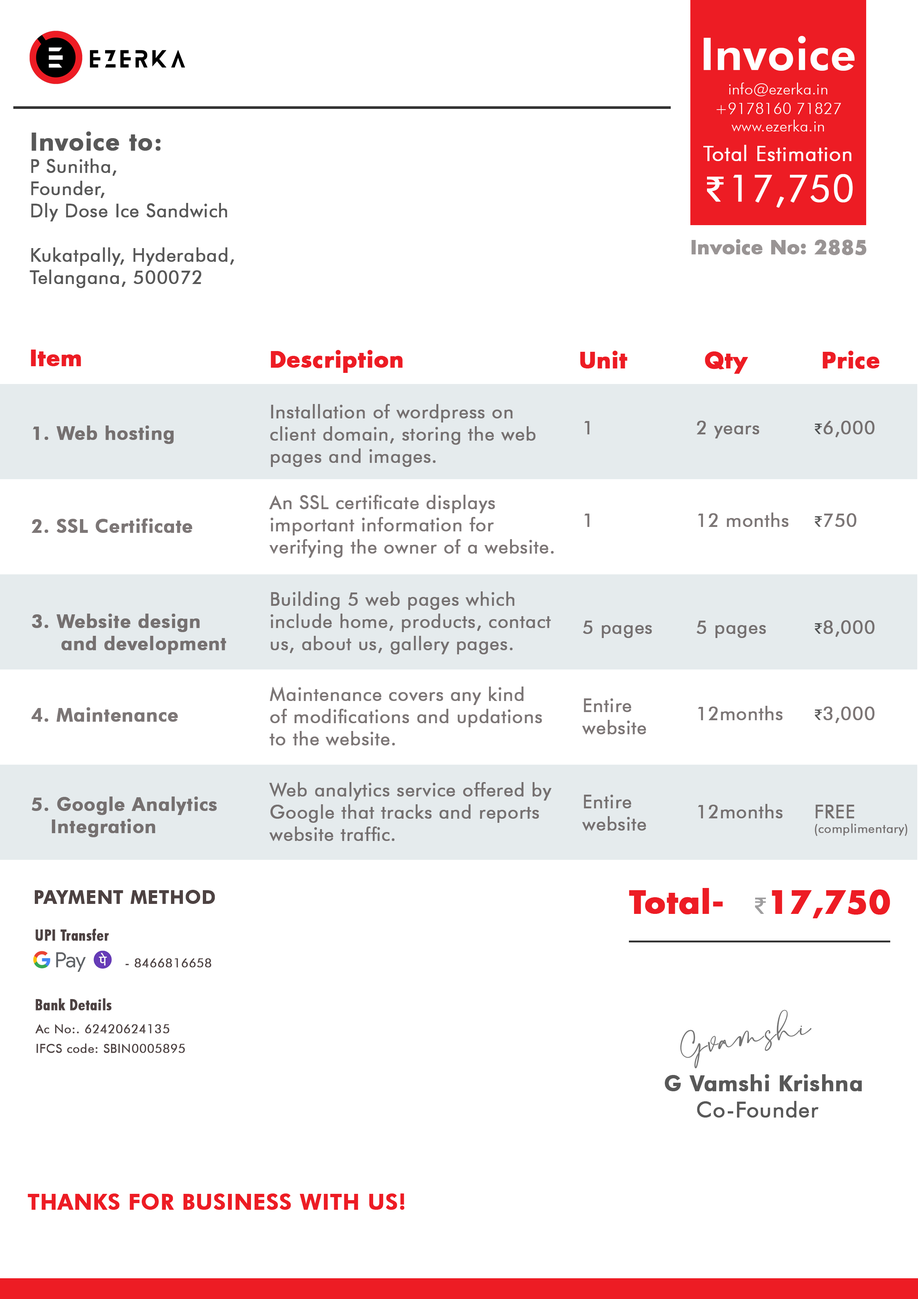
<style>
.page{position:relative;width:918px;height:1299px;background:#ffffff}
.page>*{position:absolute;margin:0}
.t1{font:45.1px "FuturaBT-Heavy";letter-spacing:0.015em;color:#fefefe}
.t2{font:15.4px "FuturaBT-Light";letter-spacing:0.015em;color:#fefefe}
.t3{font:18.5px "FuturaBT-Book";letter-spacing:0.015em;color:#585858;font-weight:bold}
.t4{font:24.7px "FuturaBT-Heavy";letter-spacing:0.015em;color:#585858;font-weight:bold}
.t5{font:20.9px "FuturaBT-Light";letter-spacing:0.015em;color:#fefefe;font-weight:bold}
.t6{font:36.9px "MyriadPro-Regular";letter-spacing:0.015em;color:#fefefe;font-weight:bold}
.t7{font:36.9px "FuturaBT-Light";letter-spacing:0.015em;color:#fefefe;font-weight:bold}
.t8{font:18.4px "Futura-Bold";letter-spacing:0.015em;color:#999494;font-weight:bold}
.t9{font:21.6px "Futura-Bold";letter-spacing:0.015em;color:#ed1c24;font-weight:bold}
.t10{font:18.5px "FuturaBT-Book";letter-spacing:0.015em;color:#757070;font-weight:bold}
.t11{font:18.5px "FuturaBT-Heavy";letter-spacing:0.015em;color:#757070;font-weight:bold}
.t12{font:15.4px "MyriadPro-Regular";letter-spacing:0.015em;color:#757070;font-weight:bold}
.t13{font:18.5px "FuturaBT-Book";letter-spacing:0.015em;color:#7c7676;font-weight:bold}
.t14{font:18.5px "FuturaBT-Heavy";letter-spacing:0.015em;color:#7c7676;font-weight:bold}
.t15{font:15.4px "MyriadPro-Regular";letter-spacing:0.015em;color:#7c7676;font-weight:bold}
.t16{font:12.3px "FuturaBT-Book";letter-spacing:0.015em;color:#757070;font-weight:bold}
.t17{font:18.5px "FuturaBT-Heavy";letter-spacing:0.015em;color:#4d4242;font-weight:bold}
.t18{font:30.9px "Futura-Bold";letter-spacing:0.015em;color:#ed1c24;font-weight:bold}
.t19{font:24.1px "MyriadPro-Regular";letter-spacing:0.015em;color:#9e9e9e;font-weight:bold}
.t20{font:15.4px "FuturaBT-BoldCondensed";letter-spacing:0.015em;color:#4d4242;font-weight:bold}
.t21{font:12.3px "FuturaBT-Book";letter-spacing:0.015em;color:#4d4242;font-weight:bold}
.t22{font:41.4px "DreamCatcher";letter-spacing:0.015em;color:#737373;font-weight:bold}
.t23{font:21.6px "FuturaBT-Heavy";letter-spacing:0.015em;color:#585858;font-weight:bold}
.t24{font:21.6px "FuturaBT-Book";letter-spacing:0.015em;color:#585858;font-weight:bold}
.t25{font:21.6px "FuturaBT-Heavy";letter-spacing:0.015em;color:#ed1c24;font-weight:bold}
</style>
<div class="page">
<p class="t1" style="left:704px;top:36px;width:151px;height:35px">Invoice</p>
<p class="t2" style="left:729px;top:83px;width:98px;height:13px">info@ezerka.in</p>
<p class="t2" style="left:717px;top:103px;width:124px;height:11px">+9178160 71827</p>
<p class="t2" style="left:732px;top:120px;width:92px;height:11px">www.ezerka.in</p>
<p class="t3" style="left:30px;top:131px;width:204px;height:157px"><span class="t4">Invoice to:<br></span>P Sunitha,<br>Founder,<br>Dly Dose Ice Sandwich<br><br>Kukatpally, Hyderabad,<br>Telangana, 500072</p>
<p class="t5" style="left:703px;top:145px;width:149px;height:16px">Total Estimation</p>
<p class="t6" style="left:707px;top:177px;width:17px;height:25px">₹</p>
<p class="t7" style="left:733px;top:174px;width:120px;height:34px">17,750</p>
<p class="t8" style="left:692px;top:239px;width:175px;height:16px">Invoice No: 2885</p>
<p class="t9" style="left:31px;top:349px;width:50px;height:17px">Item</p>
<p class="t9" style="left:271px;top:350px;width:132px;height:23px">Description</p>
<p class="t9" style="left:580px;top:351px;width:48px;height:17px">Unit</p>
<p class="t9" style="left:705px;top:351px;width:43px;height:23px">Qty</p>
<p class="t9" style="left:823px;top:351px;width:57px;height:18px">Price</p>
<p class="t10" style="left:270px;top:404px;width:266px;height:63px">Installation of wordpress on<br>client domain, storing the web<br>pages and images.</p>
<p class="t11" style="left:33px;top:425px;width:141px;height:19px">1. Web hosting</p>
<p class="t10" style="left:585px;top:421px;width:5px;height:13px">1</p>
<p class="t10" style="left:697px;top:421px;width:62px;height:17px">2 years</p>
<p class="t10" style="left:815px;top:421px;width:60px;height:16px"><span class="t12">₹</span>6,000</p>
<p class="t13" style="left:269px;top:495px;width:285px;height:63px">An SSL certificate displays <br>important information for <br>verifying the owner of a website.</p>
<p class="t14" style="left:31px;top:518px;width:162px;height:15px">2. SSL Certificate</p>
<p class="t13" style="left:585px;top:513px;width:5px;height:14px">1</p>
<p class="t13" style="left:698px;top:512px;width:91px;height:15px">12 months</p>
<p class="t13" style="left:815px;top:513px;width:42px;height:14px"><span class="t15">₹</span>750</p>
<p class="t10" style="left:271px;top:591px;width:280px;height:63px">Building 5 web pages which <br>include home, products, contact<br>us, about us, gallery pages.</p>
<p class="t11" style="left:32px;top:613px;width:194px;height:41px">3. Website design<br>  and development</p>
<p class="t10" style="left:583px;top:620px;width:69px;height:18px">5 pages</p>
<p class="t10" style="left:697px;top:620px;width:69px;height:18px">5 pages</p>
<p class="t10" style="left:815px;top:620px;width:60px;height:17px"><span class="t12">₹</span>8,000</p>
<p class="t13" style="left:270px;top:686px;width:272px;height:59px">Maintenance covers any kind<br>of modifications and updations<br>to the website.</p>
<p class="t13" style="left:582px;top:698px;width:64px;height:36px">Entire<br>website</p>
<p class="t14" style="left:31px;top:707px;width:147px;height:15px">4. Maintenance</p>
<p class="t13" style="left:698px;top:706px;width:85px;height:14px">12months</p>
<p class="t13" style="left:815px;top:706px;width:60px;height:17px"><span class="t15">₹</span>3,000</p>
<p class="t10" style="left:269px;top:782px;width:283px;height:59px">Web analytics service offered by<br>Google that tracks and reports<br>website traffic.</p>
<p class="t11" style="left:32px;top:796px;width:185px;height:41px">5. Google Analytics <br>   Integration</p>
<p class="t10" style="left:582px;top:794px;width:64px;height:36px">Entire<br>website</p>
<p class="t10" style="left:698px;top:804px;width:85px;height:14px">12months</p>
<p class="t16" style="left:815px;top:804px;width:92px;height:32px"><span class="t10">FREE<br></span>(complimentary)</p>
<p class="t17" style="left:35px;top:890px;width:180px;height:14px">PAYMENT METHOD</p>
<p class="t18" style="left:629px;top:888px;width:94px;height:26px">Total-</p>
<p class="t18" style="left:755px;top:889px;width:135px;height:29px"><span class="t19">₹</span>17,750</p>
<p class="t20" style="left:36px;top:929px;width:73px;height:12px">UPI Transfer</p>
<p class="t21" style="left:126px;top:958px;width:85px;height:9px">- 8466816658</p>
<p class="t20" style="left:36px;top:998px;width:75px;height:12px">Bank Details</p>
<p class="t22" style="left:680px;top:1010px;width:132px;height:58px;rotate:-9deg">Gvamshi</p>
<p class="t21" style="left:35px;top:1024px;width:135px;height:9px">Ac No:. 62420624135</p>
<p class="t21" style="left:36px;top:1043px;width:149px;height:10px">IFCS code: SBIN0005895</p>
<p class="t23" style="left:665px;top:1074px;width:197px;height:17px">G Vamshi Krishna</p>
<p class="t24" style="left:697px;top:1101px;width:122px;height:16px">Co-Founder</p>
<p class="t25" style="left:28px;top:1193px;width:377px;height:17px">THANKS FOR BUSINESS WITH US!</p>
</div>
